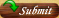
<style>
.page{position:relative;width:59px;height:18px}
.page>*{position:absolute;margin:0}
.t1{font:12px "MonotypeCorsiva";letter-spacing:0.025em;color:#ffffff;font-style:italic}
</style>
<div class="page">
<p class="t1" style="left:19px;top:5px;width:34px;height:10px">Submit</p>
</div>
